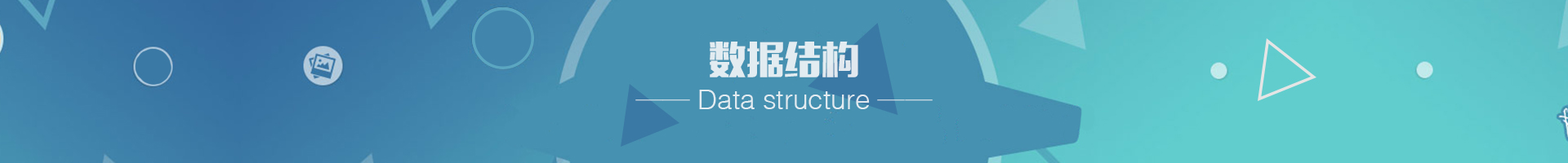
<style>
.page{position:relative;width:1568px;height:163px;background:#4691b1}
.page>*{position:absolute;margin:0}
.t1{font:37.4px "MFLiHei_Noncommercial-Regular";color:#e2ecf1}
.t2{font:27.2px "CTXiYuanSJ";color:#e2ecf1}
</style>
<div class="page">
<p class="t1" style="left:710px;top:42px;width:148px;height:36px">数据结构</p>
<p class="t2" style="left:635px;top:90px;width:298px;height:19px">—— Data structure ——</p>
</div>
